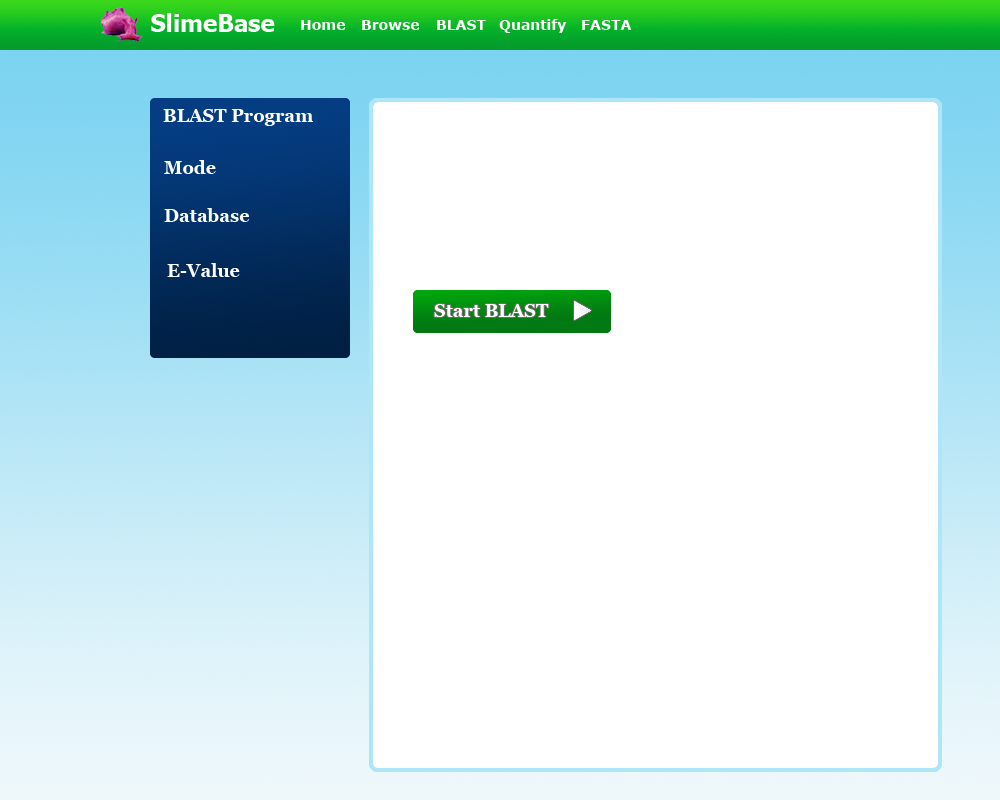
<style>
.page{position:relative;width:1000px;height:800px;background:#ffffff}
.page>*{position:absolute;margin:0}
.t1{font:24px "Tahoma-Bold";color:#ffffff}
.t2{font:14px "Verdana-Bold";color:#ffffff}
.t3{font:18px "Georgia-Bold";color:#ffffff}
</style>
<div class="page">
<p class="t1" style="left:151px;top:13px;width:124px;height:19px">SlimeBase</p>
<p class="t2" style="left:301px;top:20px;width:44px;height:10px">Home</p>
<p class="t2" style="left:362px;top:20px;width:57px;height:10px">Browse</p>
<p class="t2" style="left:437px;top:20px;width:49px;height:10px">BLAST</p>
<p class="t2" style="left:499px;top:19px;width:67px;height:14px">Quantify</p>
<p class="t2" style="left:582px;top:20px;width:50px;height:10px">FASTA</p>
<p class="t3" style="left:163px;top:109px;width:150px;height:17px">BLAST Program</p>
<p class="t3" style="left:164px;top:160px;width:52px;height:14px">Mode</p>
<p class="t3" style="left:164px;top:208px;width:86px;height:14px">Database</p>
<p class="t3" style="left:167px;top:263px;width:73px;height:14px">E-Value</p>
</div>
